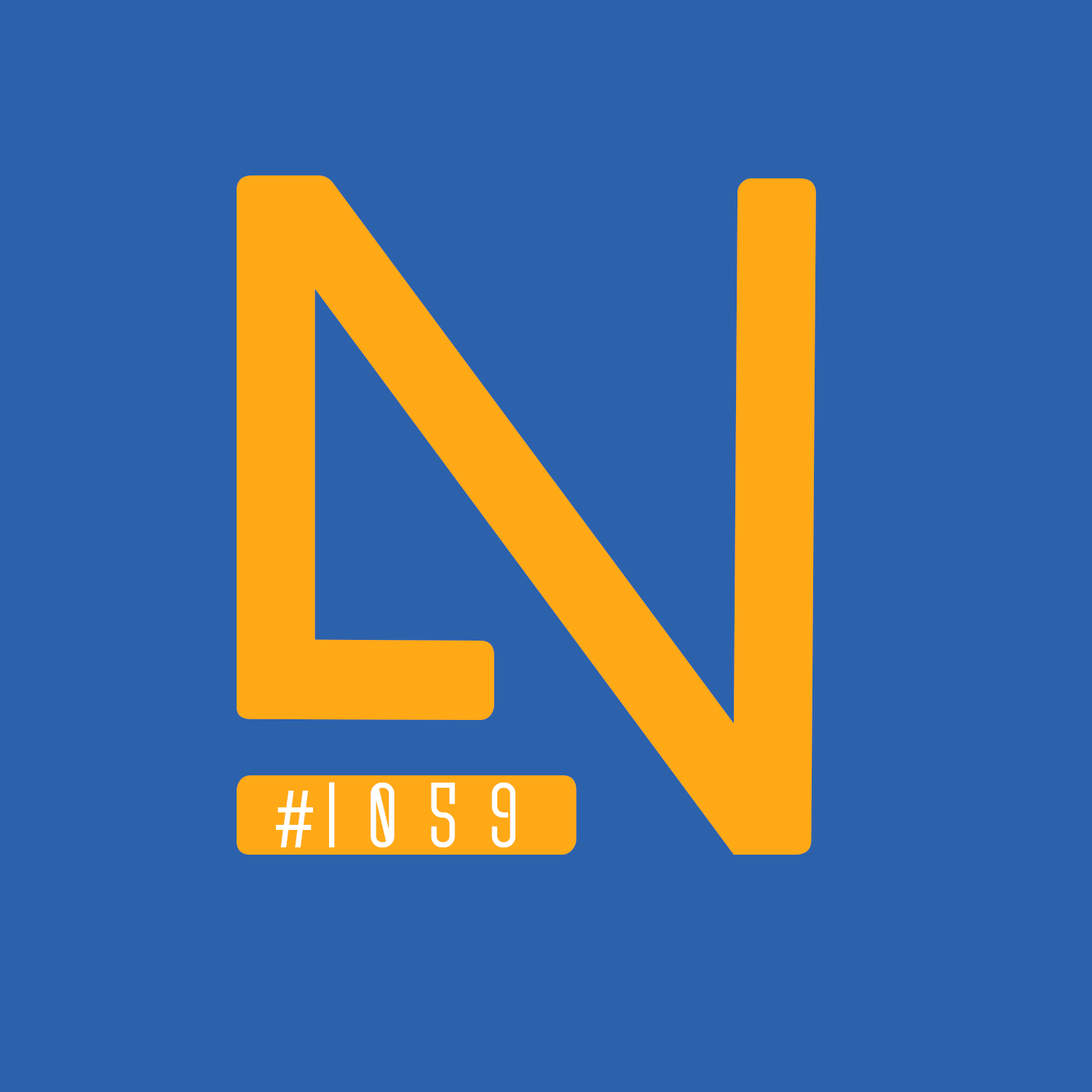
<style>
.page{position:relative;width:1092px;height:1092px;background:#2c62ac}
.page>*{position:absolute;margin:0}
.t1{font:943.5px "BEYNO";color:#ffa916}
.t2{font:87.4px "ScantypeBoldPERSONALUSE";color:#ffffff}
.t3{font:87.4px "MyriadPro-Regular";color:#ffffff}
</style>
<div class="page">
<p class="t1" style="left:237px;top:175px;width:579px;height:680px">N</p>
<p class="t2" style="left:329px;top:782px;width:186px;height:65px">9  5  0  1</p>
<p class="t3" style="left:276px;top:791px;width:37px;height:56px">#</p>
</div>
